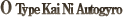
<style>
.page{position:relative;width:126px;height:18px;background:#ffffff}
.page>*{position:absolute;margin:0}
.t1{font:14px "RyuminPro-ExBold";letter-spacing:-0.12em;color:#4a3f32;font-weight:bold;scale:0.86 1}
.t2{font:18px "RyuminPro-ExBold";letter-spacing:-0.12em;color:#4a3f32;font-weight:bold;scale:0.86 1}
</style>
<div class="page">
<p class="t1" style="left:0px;top:0px;width:123px;height:17px"><span class="t2">O </span>Type Kai Ni Autogyro</p>
</div>
